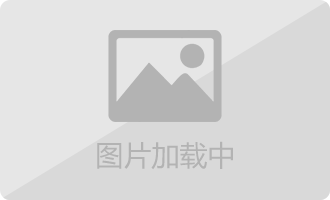
<style>
.page{position:relative;width:330px;height:200px;background:#d9d9d9}
.page>*{position:absolute;margin:0}
.t1{font:28px "MicrosoftYaHei";color:#b3b3b3}
</style>
<div class="page">
<p class="t1" style="left:97px;top:141px;width:136px;height:29px">图片加载中</p>
</div>
